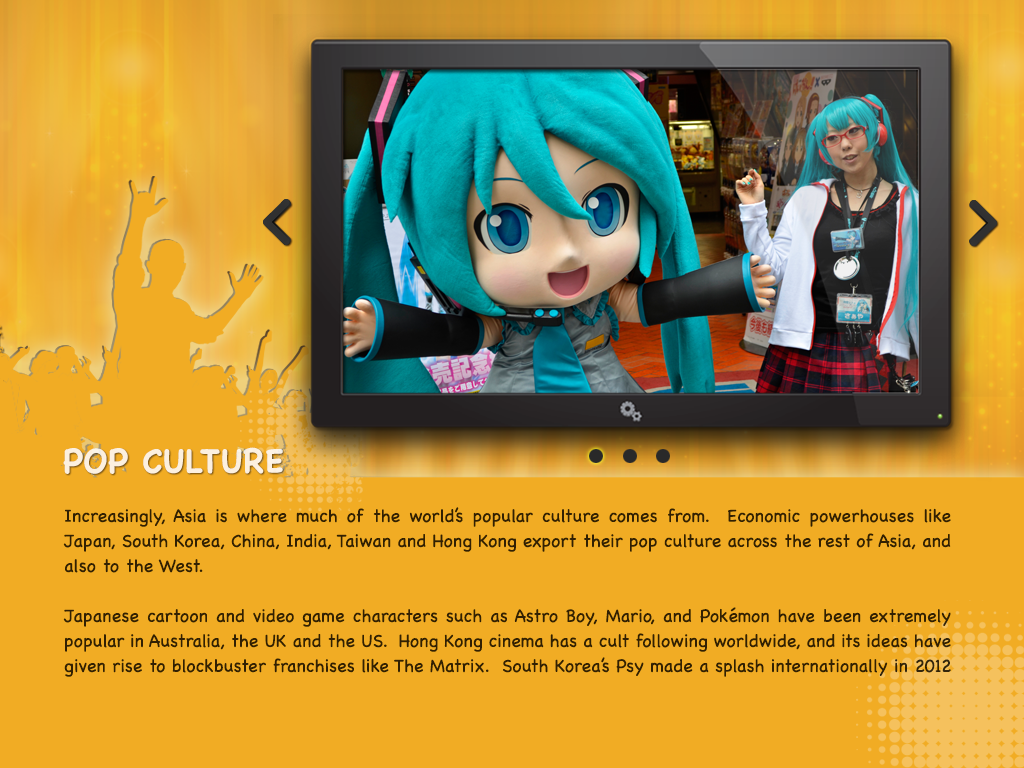
<style>
.page{position:relative;width:1024px;height:768px;background:#f1ac24}
.page>*{position:absolute;margin:0}
.t1{font:33.3px "Chalkboard-Bold";color:#fcf0df}
.t2{font:18.1px/25px "Chalkboard";color:#312003}
</style>
<div class="page">
<p class="t1" style="left:63px;top:447px;width:220px;height:27px">POP CULTURE</p>
<p class="t2" style="left:63px;top:507px;width:888px;height:170px;text-align:justify">Increasingly, Asia is where much of the world’s popular culture comes from.  Economic powerhouses like Japan, South Korea, China, India, Taiwan and Hong Kong export their pop culture across the rest of Asia, and also to the West.<br><br>Japanese cartoon and video game characters such as Astro Boy, Mario, and Pokémon have been extremely popular in Australia, the UK and the US.  Hong Kong cinema has a cult following worldwide, and its ideas have given rise to blockbuster franchises like The Matrix.  South Korea’s Psy made a splash internationally in 2012 with his pop hit Gangnam Style. And India’s film industry, Bollywood, has vast audiences – much bigger than its American counterpart, Hollywood!</p>
</div>
